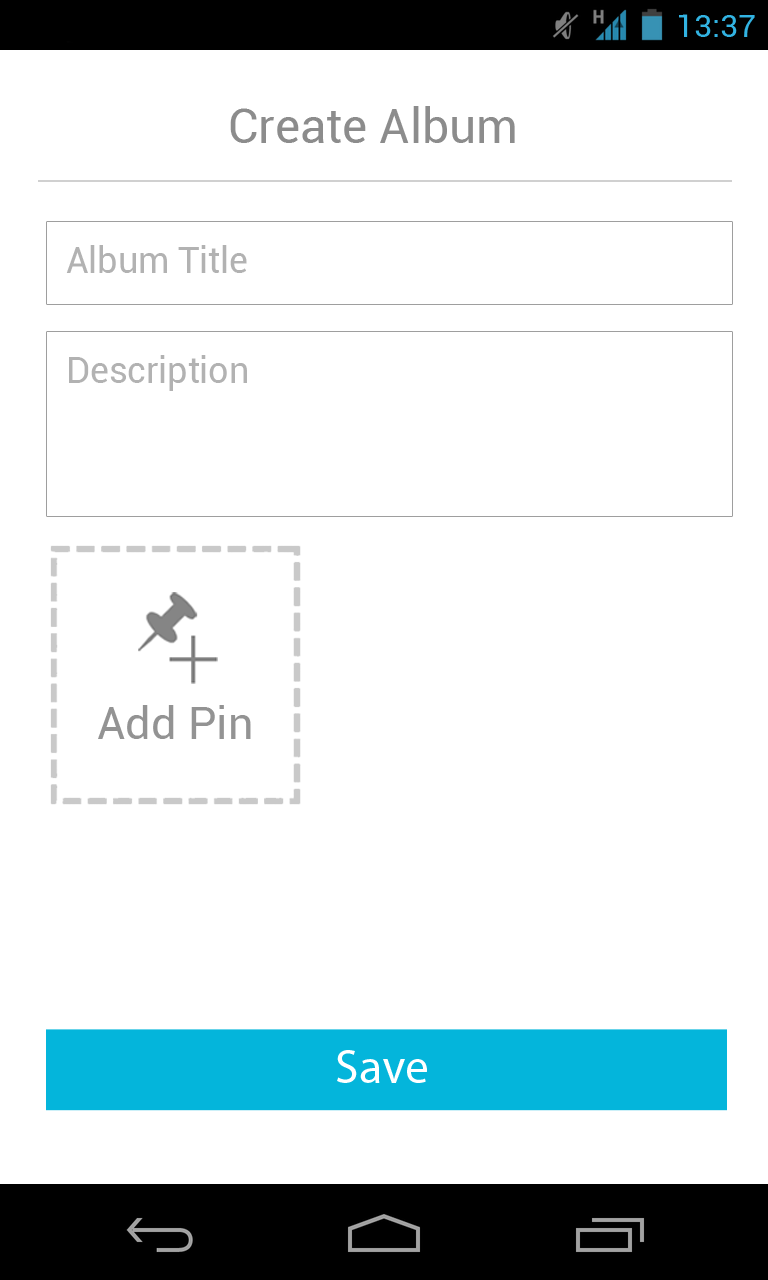
<style>
.page{position:relative;width:768px;height:1280px;background:#ffffff}
.page>*{position:absolute;margin:0}
.t1{font:48px "Roboto-Regular";color:#8c8c8c}
.t2{font:35.6px "Roboto-Regular";color:#b2b2b2}
.t3{font:45px "Roboto-Regular";color:#939393}
.t4{font:48px "MyriadPro-Regular";color:#ffffff}
</style>
<div class="page">
<p class="t1" style="left:230px;top:106px;width:285px;height:37px">Create Album</p>
<p class="t2" style="left:66px;top:245px;width:181px;height:28px">Album Title</p>
<p class="t2" style="left:69px;top:355px;width:178px;height:36px">Description</p>
<p class="t3" style="left:98px;top:705px;width:153px;height:34px">Add Pin</p>
<p class="t4" style="left:337px;top:1050px;width:90px;height:33px">Save</p>
</div>
